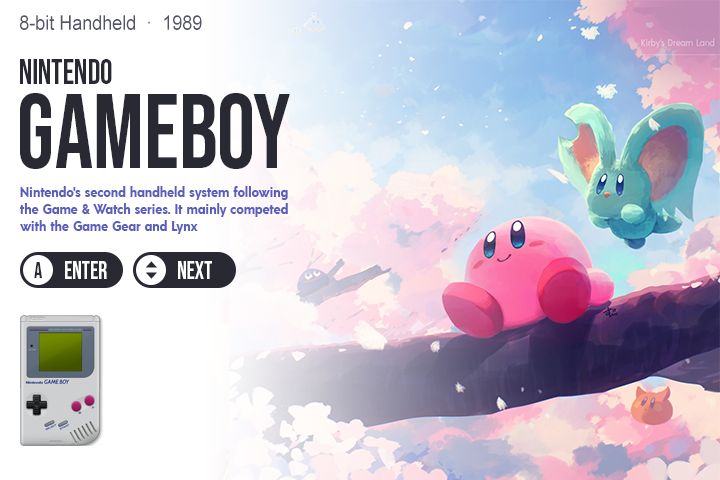
<style>
.page{position:relative;width:720px;height:480px;background:#ffffff}
.page>*{position:absolute;margin:0}
.t1{font:20px "ArialMT";color:#535468;scale:0.9 1}
.t2{font:35px "BebasNeue-Regular";color:#292933;scale:0.9 1}
.t3{font:106px "BebasNeue-Regular";color:#292933;scale:0.9 1}
.t4{font:14px "Acre-Bold";color:#595ebc;scale:0.9 1}
</style>
<div class="page">
<p class="t1" style="left:20px;top:15px;width:182px;height:15px">1989  ·  8-bit Handheld</p>
<p class="t2" style="left:20px;top:59px;width:92px;height:25px">nintendo</p>
<p class="t3" style="left:20px;top:93px;width:270px;height:76px">gameboy</p>
<p class="t4" style="left:20px;top:186px;width:268px;height:48px;text-align:right">Nintendo's second handheld system following<br>the Game &amp; Watch series. It mainly competed<br>with the Game Gear and Lynx</p>
</div>
